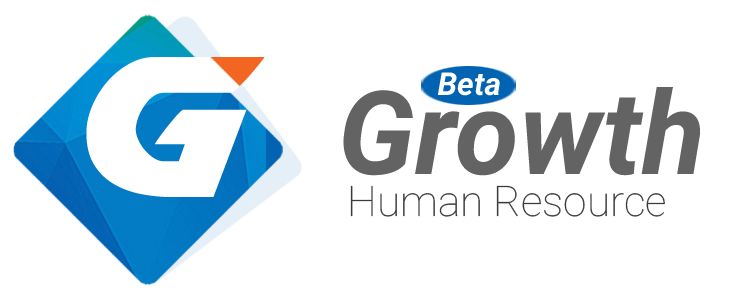
<style>
.page{position:relative;width:754px;height:300px;background:#ffffff}
.page>*{position:absolute;margin:0}
.t1{font:264.5px "Airstrike";color:#ffffff}
.t2{font:31.8px "Roboto-BoldItalic";color:#ffffff}
.t3{font:116.4px "Roboto-BoldItalic";color:#636363}
.t4{font:42.3px "Roboto-Thin";color:#393b3c}
</style>
<div class="page">
<p class="t1" style="left:86px;top:57px;width:179px;height:140px">G</p>
<p class="t2" style="left:437px;top:72px;width:63px;height:24px">Beta</p>
<p class="t3" style="left:343px;top:87px;width:357px;height:89px">Growth</p>
<p class="t4" style="left:350px;top:185px;width:315px;height:32px">Human Resource</p>
</div>
